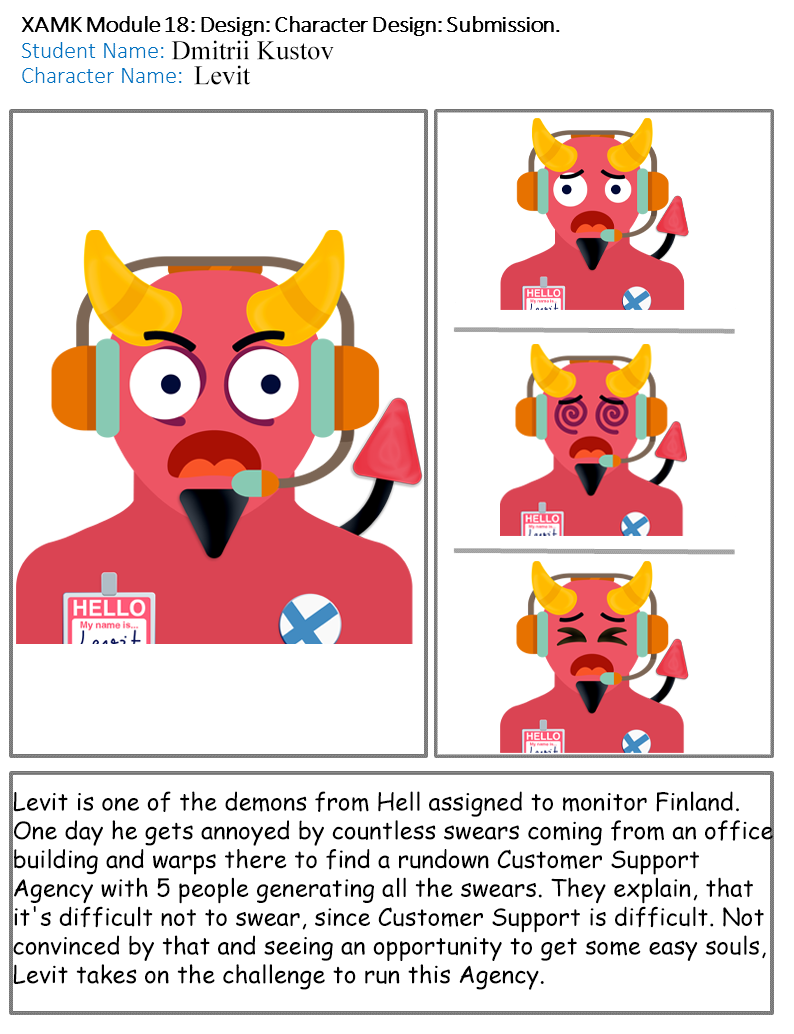
<style>
.page{position:relative;width:794px;height:1034px;background:#ffffff}
.page>*{position:absolute;margin:0}
.t1{font:26.7px "TimesNewRomanPSMT";color:#000000}
.t2{font:24px "ComicSansMS";color:#000000}
</style>
<div class="page">
<p class="t1" style="left:171px;top:40px;width:163px;height:20px">Dmitrii Kustov</p>
<p class="t1" style="left:194px;top:65px;width:57px;height:20px">Levit</p>
<p class="t2" style="left:13px;top:791px;width:760px;height:199px">Levit is one of the demons from Hell assigned to monitor Finland.<br>One day he gets annoyed by countless swears coming from an office<br>building and warps there to find a rundown Customer Support<br>Agency with 5 people generating all the swears. They explain, that<br>it's difficult not to swear, since Customer Support is difficult. Not<br>convinced by that and seeing an opportunity to get some easy souls,<br>Levit takes on the challenge to run this Agency.</p>
</div>
